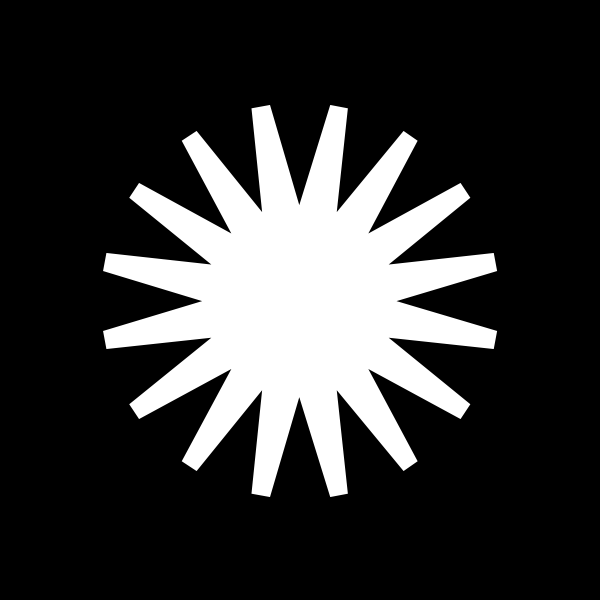
<style>
.page{position:relative;width:600px;height:600px;background:#000000}
.page>*{position:absolute;margin:0}
.t1{font:570.9px "ArialUnicodeMS";color:#ffffff}
</style>
<div class="page">
<p class="t1" style="left:103px;top:105px;width:395px;height:392px">✺</p>
</div>
